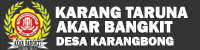
<style>
.page{position:relative;width:200px;height:50px;background:#333333}
.page>*{position:absolute;margin:0}
.t1{font:16.7px "FranklinGothic-Heavy";color:#fefefe}
.t2{font:12.5px "FranklinGothic-Heavy";color:#ffffff}
</style>
<div class="page">
<p class="t1" style="left:55px;top:6px;width:133px;height:13px">KARANG TARUNA</p>
<p class="t1" style="left:56px;top:21px;width:117px;height:12px">AKAR BANGKIT</p>
<p class="t2" style="left:56px;top:36px;width:118px;height:10px">DESA KARANGBONG</p>
</div>
